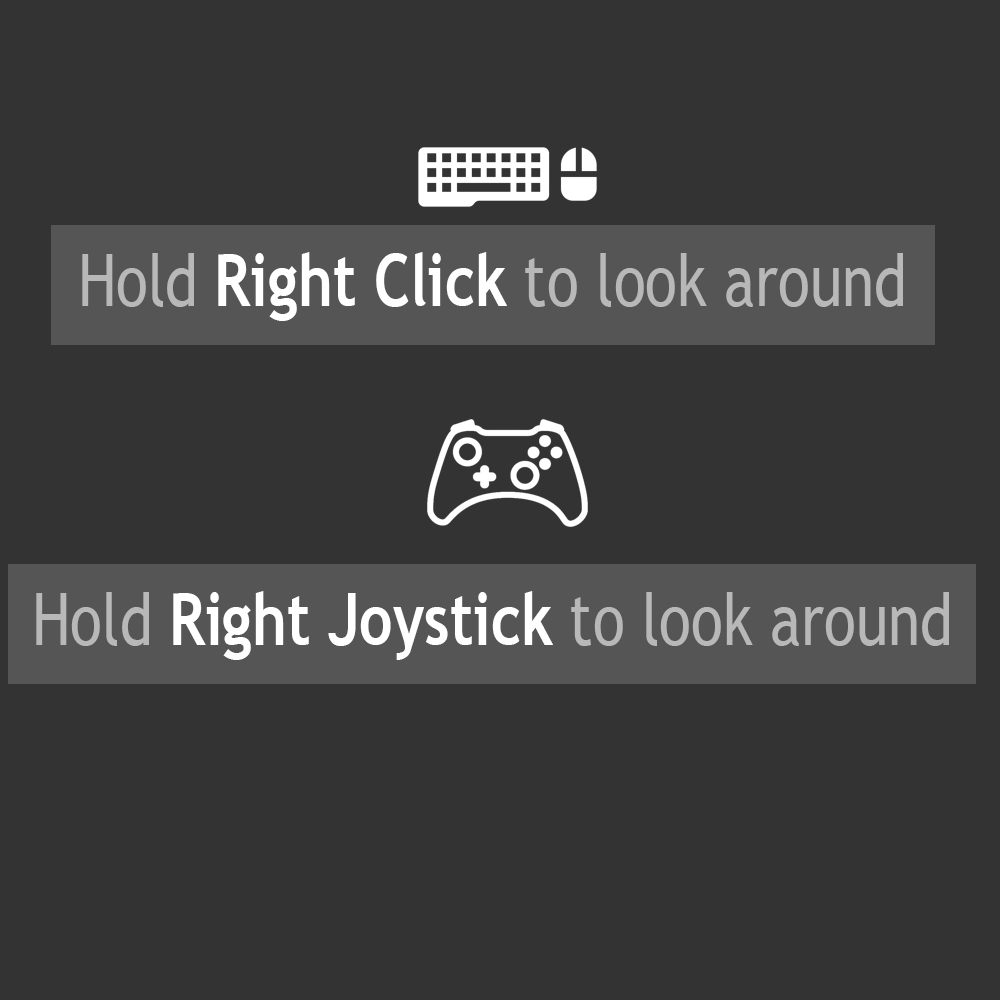
<style>
.page{position:relative;width:1000px;height:1000px;background:#333333}
.page>*{position:absolute;margin:0}
.t1{font:72.1px "TrebuchetMS";color:#b8b8b8;scale:0.82 1}
.t2{font:72.1px "TrebuchetMS-Bold";color:#ffffff;scale:0.82 1}
</style>
<div class="page">
<p class="t1" style="left:82px;top:252px;width:821px;height:69px">Hold <span class="t2">Right Click </span>to look around</p>
<p class="t2" style="left:36px;top:591px;width:913px;height:69px"><span class="t1">Hold </span>Right Joystick <span class="t1">to look around</span></p>
</div>
